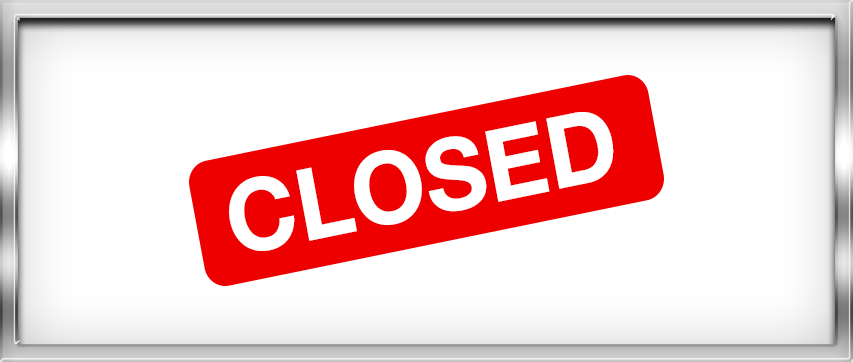
<style>
.page{position:relative;width:853px;height:362px;background:#ffffff}
.page>*{position:absolute;margin:0}
.t1{font:99.8px "HelveticaNeue-Bold";color:#ffffff;scale:0.96 1}
</style>
<div class="page">
<p class="t1" style="left:229px;top:112px;width:385px;height:139px;rotate:-12deg">CLOSED</p>
</div>
